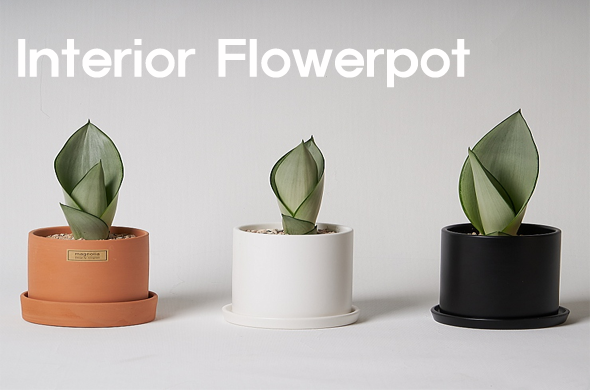
<style>
.page{position:relative;width:590px;height:390px}
.page>*{position:absolute;margin:0}
.t1{font:48px "ExpoM-HM";letter-spacing:0.01em;color:#fffefe}
</style>
<div class="page">
<p class="t1" style="left:18px;top:39px;width:452px;height:49px">Interior Flowerpot</p>
</div>
